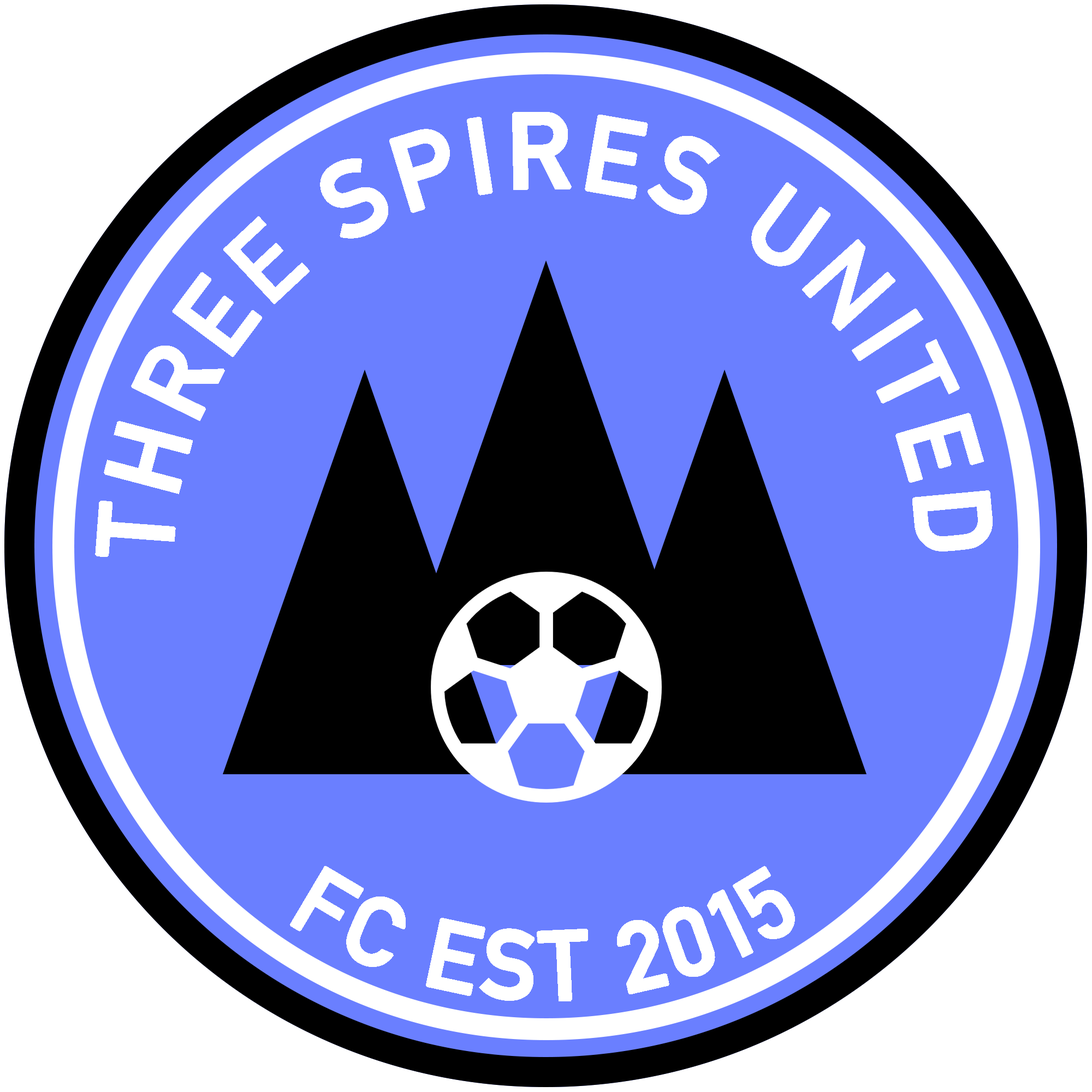
<style>
.page{position:relative;width:1092px;height:1092px;background:#6a7fff}
.page>*{position:absolute;margin:0}
.t1{font:104.6px "AlteDIN1451Mittelschrift";letter-spacing:0.05em;color:#ffffff;font-weight:bold}
.t2{font:95.5px "AlteDIN1451Mittelschrift";letter-spacing:0.05em;color:#ffffff;font-weight:bold}
</style>
<div class="page">
<p class="t1" style="left:95px;top:112px;width:898px;height:445px;text-align:center">THREE SPIRES UNITED</p>
<p class="t2" style="left:290px;top:866px;width:505px;height:135px">FC EST 2015</p>
</div>
